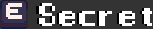
<style>
.page{position:relative;width:153px;height:29px;background:#333333}
.page>*{position:absolute;margin:0}
.t1{font:30px "ManaspaceReg";color:#ffffff}
</style>
<div class="page">
<p class="t1" style="left:39px;top:3px;width:113px;height:23px">Secret</p>
</div>
